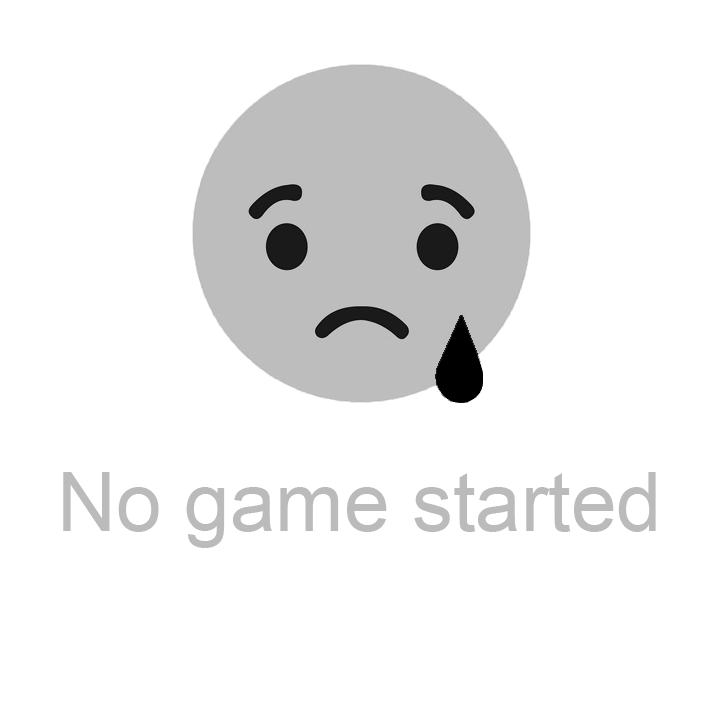
<style>
.page{position:relative;width:722px;height:722px;background:#ffffff}
.page>*{position:absolute;margin:0}
.t1{font:82px "ArialMT";color:#bbbbbb}
</style>
<div class="page">
<p class="t1" style="left:63px;top:472px;width:593px;height:76px">No game started</p>
</div>
